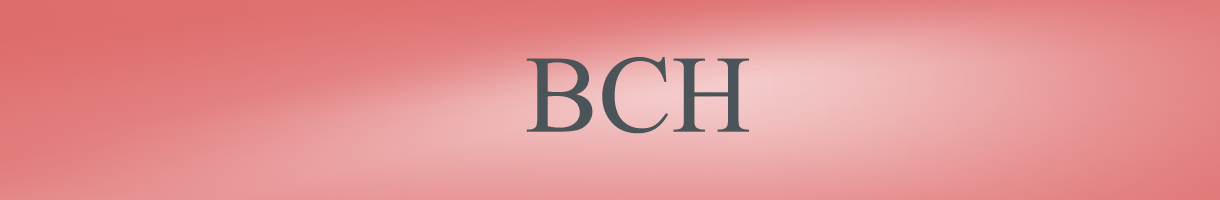
<style>
.page{position:relative;width:1220px;height:200px}
.page>*{position:absolute;margin:0}
.t1{font:110px "MongolianBaiti";color:#4b5458}
</style>
<div class="page">
<p class="t1" style="left:526px;top:57px;width:223px;height:77px">BCH</p>
</div>
